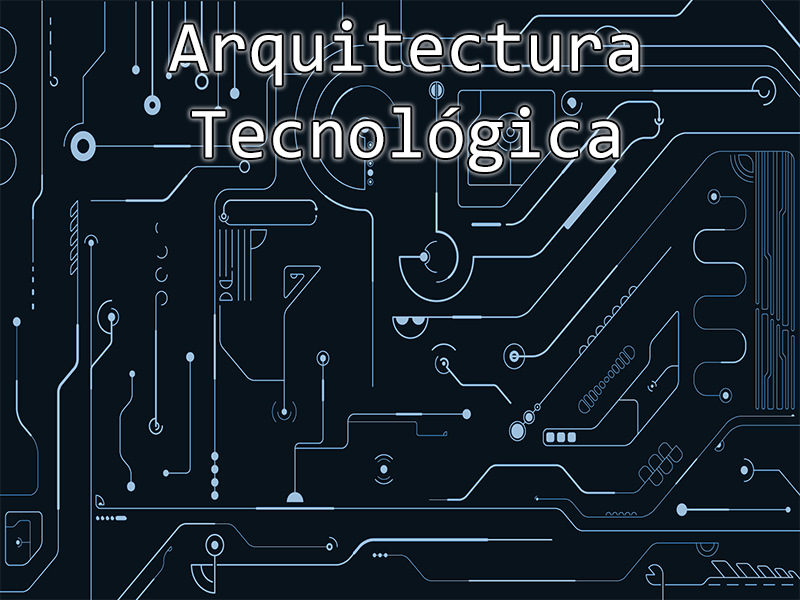
<style>
.page{position:relative;width:800px;height:600px;background:#09131c}
.page>*{position:absolute;margin:0}
.t1{font:72px "Consolas";color:#ffffff}
</style>
<div class="page">
<p class="t1" style="left:169px;top:20px;width:470px;height:152px;text-align:center">Arquitectura<br>Tecnológica</p>
</div>
